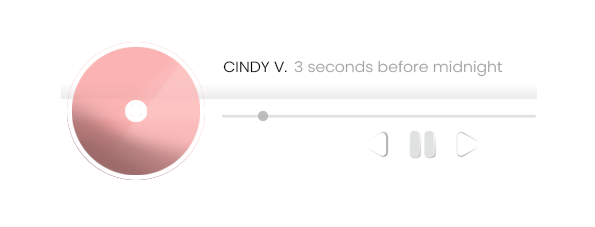
<style>
.page{position:relative;width:595px;height:227px;background:#ffffff}
.page>*{position:absolute;margin:0}
.t1{font:14.8px "Poppins-Light";color:#000000;scale:1.06 1}
.t2{font:14.8px "Poppins-Light";color:#a3a3a3;scale:1.06 1}
</style>
<div class="page">
<p class="t1" style="left:223px;top:61px;width:64px;height:12px">CINDY V.</p>
<p class="t2" style="left:294px;top:60px;width:209px;height:17px">3 seconds before midnight</p>
</div>
